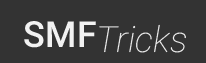
<style>
.page{position:relative;width:206px;height:63px;background:#333333}
.page>*{position:absolute;margin:0}
.t1{font:36px "Roboto-Medium";color:#f2f2f2}
.t2{font:36px "Roboto-ThinItalic";color:#f2f2f2}
</style>
<div class="page">
<p class="t1" style="left:24px;top:21px;width:72px;height:27px">SMF</p>
<p class="t2" style="left:99px;top:24px;width:87px;height:29px">Tricks</p>
</div>
